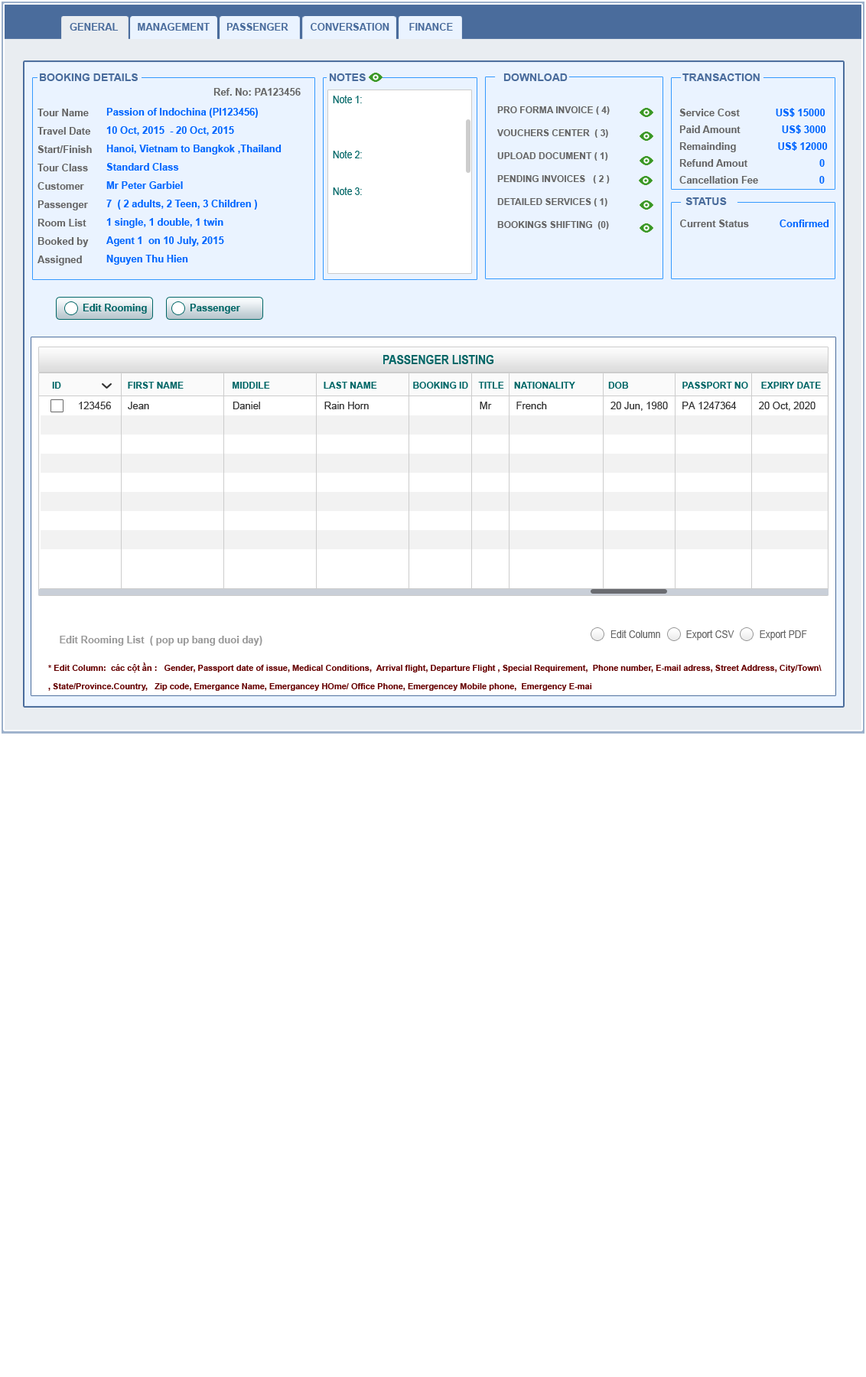
<style>
.page{position:relative;width:866px;height:1377px;background:#ffffff}
.page>*{position:absolute;margin:0}
.t1{font:9.9px "Arial-BoldMT";color:#4a6c9c}
.t2{font:10.7px "Arial-BoldMT";color:#4a6c9c}
.t3{font:9.9px "Arial-BoldMT";color:#666666}
.t4{font:11px/18.4px "ArialMT";color:#006666;scale:0.83 1}
.t5{font:9.9px/18.4px "Arial-BoldMT";color:#666666}
.t6{font:9.9px/19.9px "Arial-BoldMT";color:#666666}
.t7{font:9.9px/18.4px "Arial-BoldMT";color:#0066ff}
.t8{font:9.2px/22.9px "Arial-BoldMT";color:#666666}
.t9{font:9.2px "Arial-BoldMT";color:#666666}
.t10{font:9.9px/16.8px "Arial-BoldMT";color:#666666}
.t11{font:9.9px/16.8px "Arial-BoldMT";color:#0066ff}
.t12{font:9.9px "Arial-BoldMT";color:#0066ff}
.t13{font:9.9px "Arial-BoldMT";color:#006666}
.t14{font:12.9px "Arial-BoldMT";color:#006666;scale:0.83 1}
.t15{font:9.2px "Arial-BoldMT";color:#006666}
.t16{font:9.9px "ArialMT";color:#333333}
.t17{font:11px "ArialMT";color:#666666;scale:0.83 1}
.t18{font:9.9px "Arial-BoldMT";color:#999999}
.t19{font:8.4px/18.4px "Arial-BoldMT";color:#660000}
</style>
<div class="page">
<p class="t1" style="left:70px;top:23px;width:383px;height:8px">GENERAL       MANAGEMENT      PASSENGER        CONVERSATION       FINANCE</p>
<p class="t2" style="left:40px;top:73px;width:98px;height:8px">BOOKING DETAILS</p>
<p class="t2" style="left:329px;top:73px;width:37px;height:8px">NOTES</p>
<p class="t2" style="left:503px;top:73px;width:65px;height:8px">DOWNLOAD</p>
<p class="t2" style="left:682px;top:73px;width:78px;height:8px">TRANSACTION</p>
<p class="t3" style="left:213px;top:88px;width:88px;height:8px">Ref. No: PA123456</p>
<p class="t4" style="left:333px;top:95px;width:29px;height:100px;text-align:justify">Note 1:<br><br><br>Note 2:<br><br>Note 3:</p>
<p class="t5" style="left:37px;top:109px;width:55px;height:156px;text-align:justify"><span class="t6"><br></span>Tour Name  <br>Travel Date<br>Start/Finish<br>Tour Class<br>Customer<br>Passenger<br>Room List<br>Booked by <br>Assigned</p>
<p class="t7" style="left:106px;top:108px;width:176px;height:157px;text-align:justify">Passion of Indochina (PI123456)<br>10 Oct, 2015  - 20 Oct, 2015<br>Hanoi, Vietnam to Bangkok ,Thailand<br>Standard Class<br>Mr Peter Garbiel<br>7  ( 2 adults, 2 Teen, 3 Children )<br>1 single, 1 double, 1 twin<br>Agent 1  on 10 July, 2015<br>Nguyen Thu Hien</p>
<p class="t8" style="left:497px;top:106px;width:113px;height:123px;text-align:justify"><span class="t9"><br></span>PRO FORMA INVOICE ( 4)<br>VOUCHERS CENTER  ( 3)<br>UPLOAD DOCUMENT ( 1)<br>PENDING INVOICES   ( 2 )<br>DETAILED SERVICES ( 1)<br>BOOKINGS SHIFTING  (0)</p>
<p class="t10" style="left:679px;top:108px;width:149px;height:76px;text-align:justify">Service Cost             <span class="t11">US$ 15000 <br></span>Paid Amount               <span class="t11">US$ 3000 <br></span>Remainding               <span class="t11">US$ 12000<br></span>Refund Amout                          <span class="t11">0<br></span>Cancellation Fee <span class="t11">                     0</span></p>
<p class="t2" style="left:685px;top:197px;width:42px;height:8px">STATUS</p>
<p class="t3" style="left:680px;top:220px;width:149px;height:7px">Current Status           <span class="t12">Confirmed</span></p>
<p class="t13" style="left:83px;top:304px;width:64px;height:10px">Edit Rooming</p>
<p class="t13" style="left:190px;top:304px;width:50px;height:10px">Passenger</p>
<p class="t14" style="left:383px;top:355px;width:111px;height:9px">PASSENGER LISTING</p>
<p class="t15" style="left:52px;top:382px;width:769px;height:7px">ID                          FIRST NAME                   MIDDILE                     LAST NAME              BOOKING ID    TITLE    NATIONALITY             DOB                     PASSPORT NO     EXPIRY DATE</p>
<p class="t16" style="left:79px;top:402px;width:736px;height:9px">123456      Jean                           Daniel                       Rain Horn                                        Mr         French                       20 Jun, 1980     PA 1247364        20 Oct, 2020</p>
<p class="t17" style="left:610px;top:630px;width:197px;height:10px">Edit Column          Export CSV          Export PDF</p>
<p class="t18" style="left:60px;top:636px;width:202px;height:10px">Edit Rooming List  ( pop up bang duoi day)</p>
<p class="t19" style="left:48px;top:662px;width:774px;height:29px;text-align:justify">* Edit Column:  các cột ần :   Gender, Passport date of issue, Medical Conditions,  Arrival flight, Departure Flight , Special Requirement,  Phone number, E-mail adress, Street Address, City/Town\<br>, State/Province.Country,   Zip code, Emergance Name, Emergancey HOme/ Office Phone, Emergencey Mobile phone,  Emergency E-mai</p>
</div>
